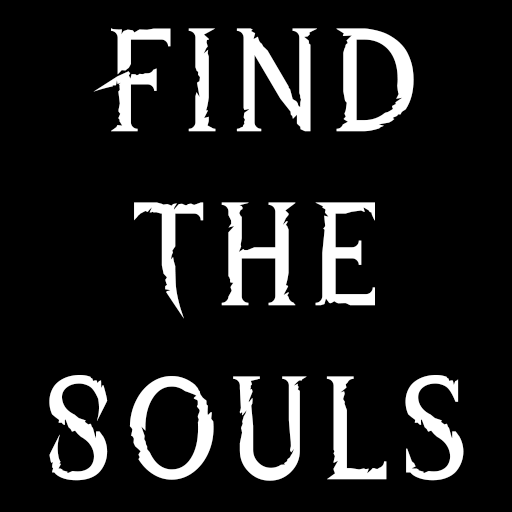
<style>
.page{position:relative;width:512px;height:512px;background:#000000}
.page>*{position:absolute;margin:0}
.t1{font:145.2px "WreckedShipRegular";letter-spacing:0.05em;color:#ffffff}
</style>
<div class="page">
<p class="t1" style="left:49px;top:28px;width:415px;height:453px;text-align:center">Find<br>The<br>Souls</p>
</div>
